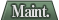
<style>
.page{position:relative;width:59px;height:20px}
.page>*{position:absolute;margin:0}
.t1{font:16px "RyuminPro-ExBold";letter-spacing:-0.08em;color:#e6e6e6;scale:0.9 1}
</style>
<div class="page">
<p class="t1" style="left:12px;top:5px;width:37px;height:12px">Maint.</p>
</div>
